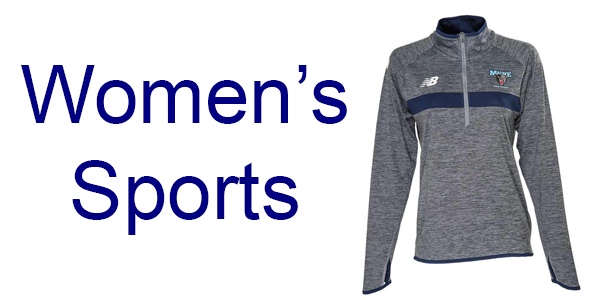
<style>
.page{position:relative;width:600px;height:300px;background:#ffffff}
.page>*{position:absolute;margin:0}
.t1{font:80px "ArialMT";color:#000080}
</style>
<div class="page">
<p class="t1" style="left:21px;top:65px;width:326px;height:170px;text-align:center">Women’s<br>Sports</p>
</div>
